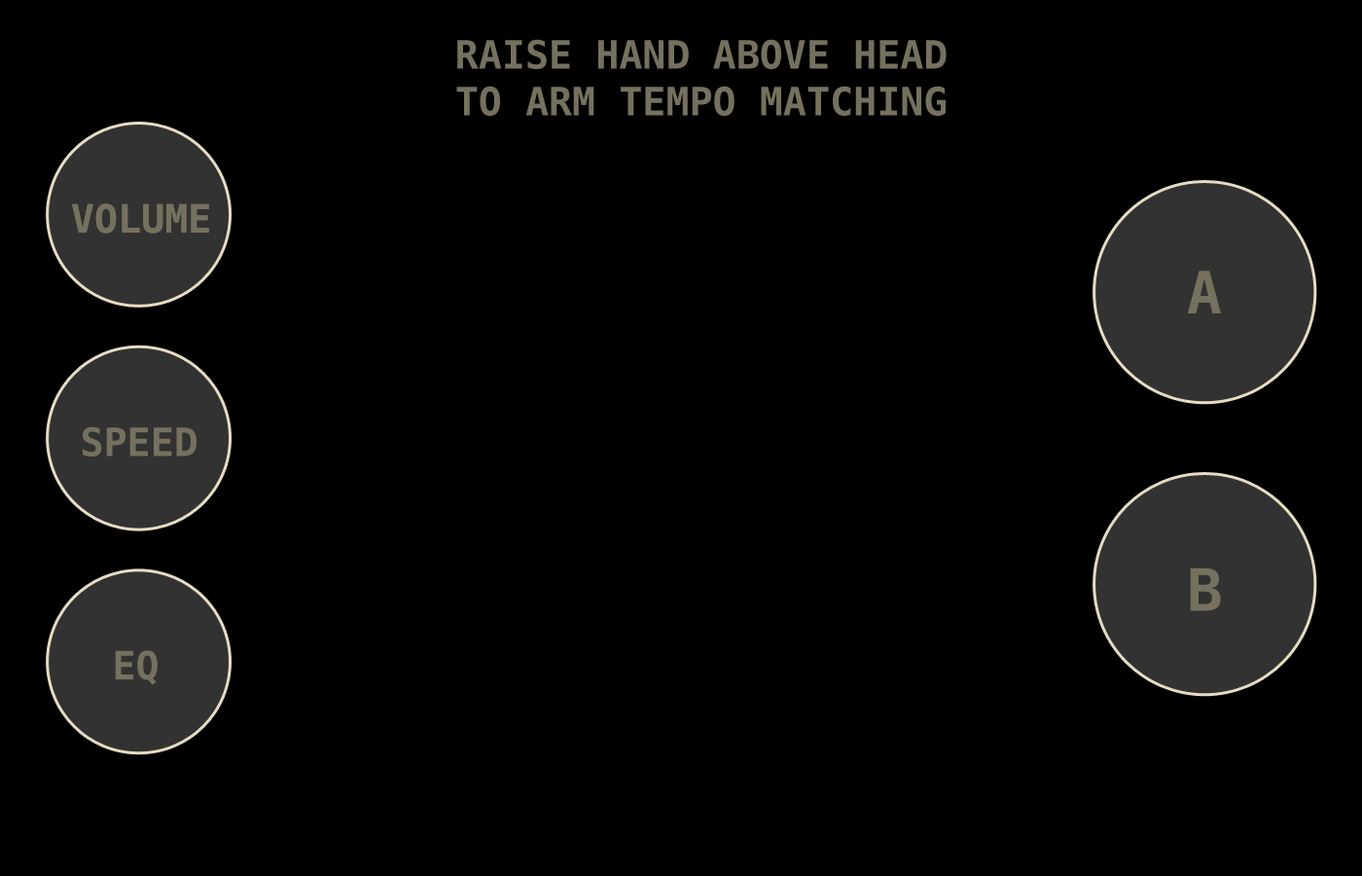
<style>
.page{position:relative;width:1362px;height:876px;background:#000000}
.page>*{position:absolute;margin:0}
.t1{font:38.9px "Menlo-Bold";color:#75715e}
.t2{font:58.4px "Menlo-Bold";color:#75715e}
</style>
<div class="page">
<p class="t1" style="left:456px;top:39px;width:491px;height:77px">RAISE HAND ABOVE HEAD<br>TO ARM TEMPO MATCHING</p>
<p class="t1" style="left:72px;top:203px;width:137px;height:30px">VOLUME</p>
<p class="t1" style="left:72px;top:203px;width:137px;height:30px">VOLUME</p>
<p class="t2" style="left:1187px;top:270px;width:34px;height:43px">A</p>
<p class="t1" style="left:83px;top:426px;width:114px;height:30px">SPEED</p>
<p class="t2" style="left:1190px;top:567px;width:31px;height:44px">B</p>
<p class="t1" style="left:115px;top:650px;width:43px;height:35px">EQ</p>
</div>
